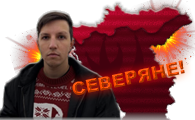
<style>
.page{position:relative;width:195px;height:120px}
.page>*{position:absolute;margin:0}
.t1{font:18px "Arial-Black"}
</style>
<div class="page">
<p class="t1" style="left:72px;top:60px;width:113px;height:35px;rotate:-12deg">СЕВЕРЯНЕ!</p>
</div>
